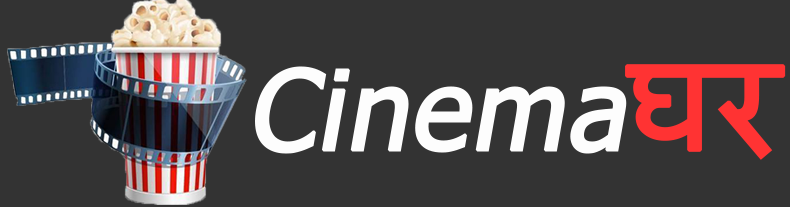
<style>
.page{position:relative;width:790px;height:207px;background:#333333}
.page>*{position:absolute;margin:0}
.t1{font:110px "Tahoma";color:#fdfdfd;font-weight:bold;font-style:italic}
.t2{font:130px "Mangal";color:#ff3333;font-weight:bold}
</style>
<div class="page">
<p class="t1" style="left:255px;top:64px;width:531px;height:96px">Cinema<span class="t2">घर</span></p>
</div>
